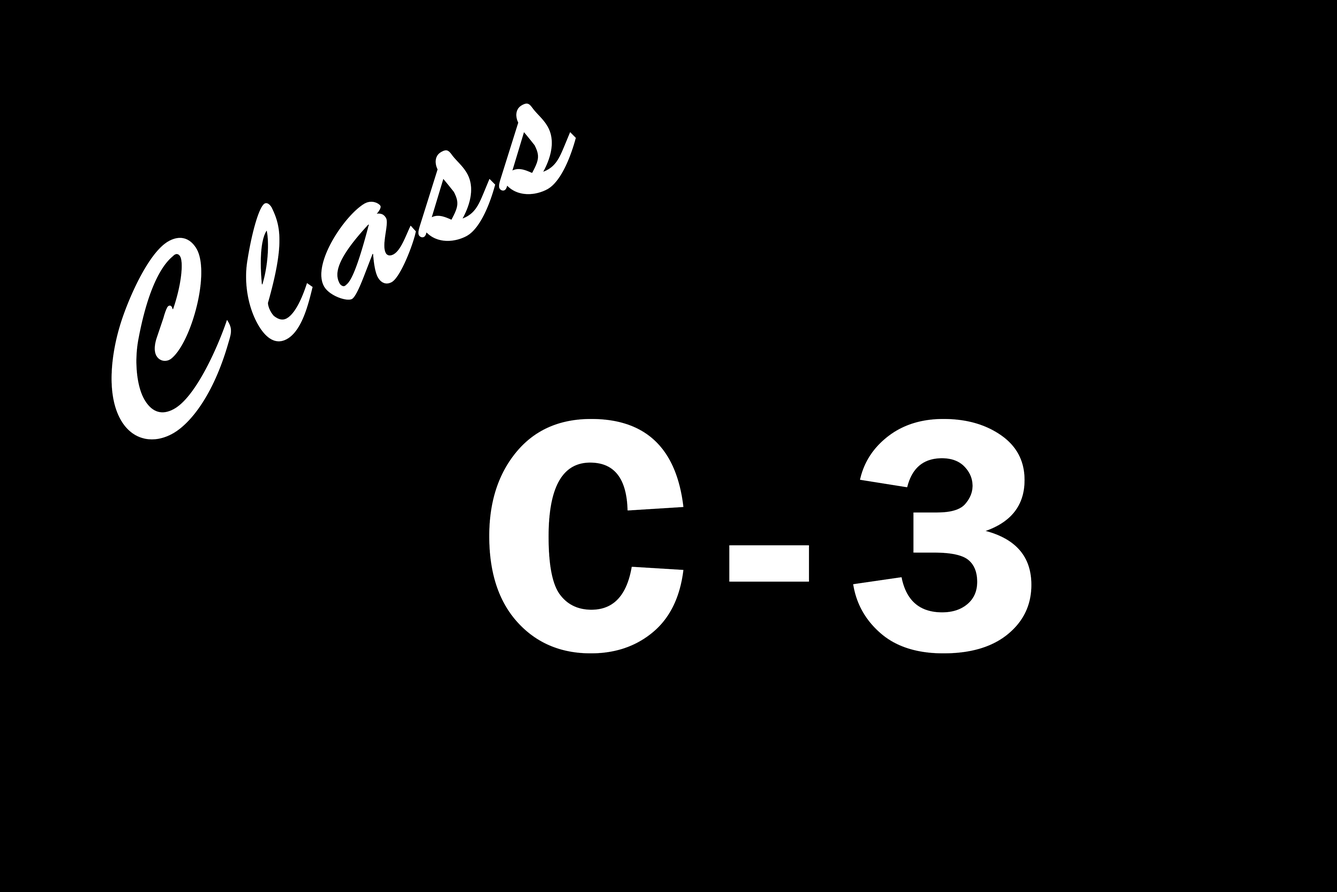
<style>
.page{position:relative;width:1337px;height:892px;background:#000000}
.page>*{position:absolute;margin:0}
.t1{font:203.7px "BrushScriptStd";letter-spacing:0.1em;color:#ffffff}
.t2{font:341.1px "FranklinGothic-Demi";letter-spacing:0.1em;color:#ffffff}
</style>
<div class="page">
<p class="t1" style="left:111px;top:103px;width:465px;height:336px;rotate:-30deg">Class</p>
<p class="t2" style="left:489px;top:419px;width:543px;height:234px">C-3</p>
</div>
